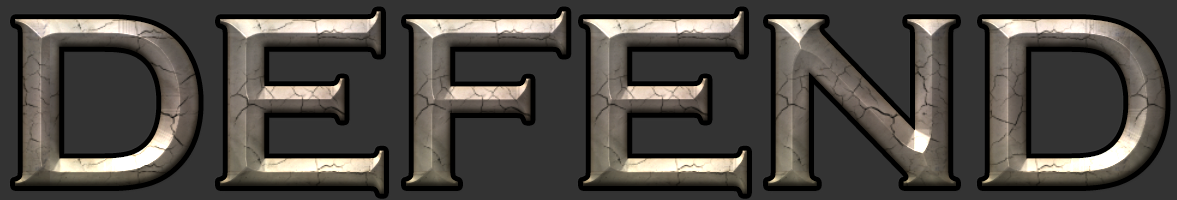
<style>
.page{position:relative;width:1177px;height:200px;background:#333333}
.page>*{position:absolute;margin:0}
.t1{font:250px "CopperplateGothic-Bold"}
</style>
<div class="page">
<p class="t1" style="left:14px;top:11px;width:1152px;height:183px">DEFEND</p>
</div>
